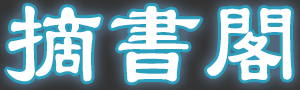
<style>
.page{position:relative;width:300px;height:90px;background:#ffffff}
.page>*{position:absolute;margin:0}
.t1{font:120px "LiSu";color:#ffffff;scale:0.83 1}
</style>
<div class="page">
<p class="t1" style="left:7px;top:5px;width:285px;height:78px">摘書閣</p>
</div>
